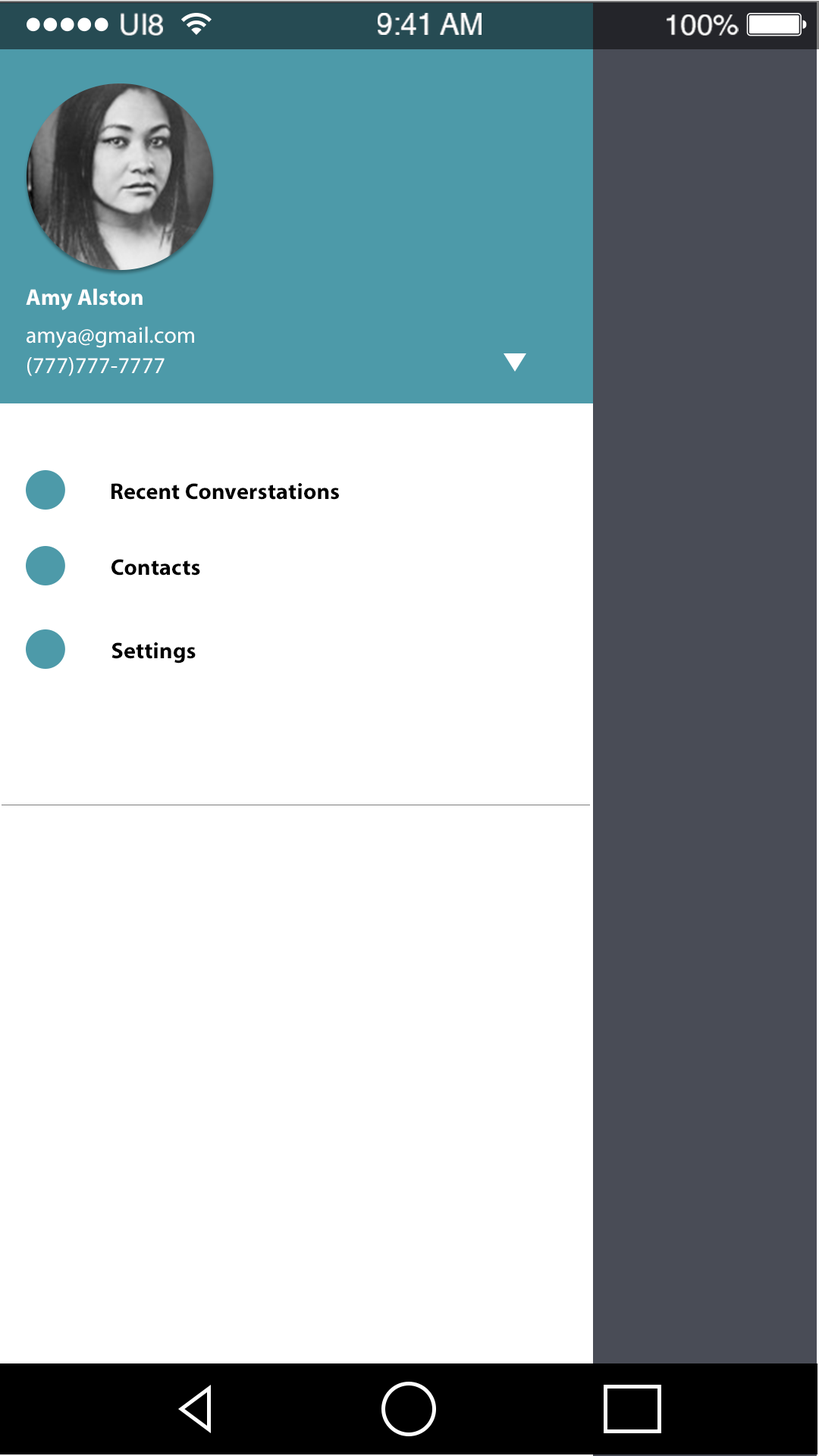
<style>
.page{position:relative;width:819px;height:1456px;background:#ffffff}
.page>*{position:absolute;margin:0}
.t1{font:29.1px "Helvetica";color:#ffffff}
.t2{font:22.7px "MyriadPro-Bold";letter-spacing:0.01em;color:#ffffff}
.t3{font:22.7px "MyriadPro-Regular";letter-spacing:0.01em;color:#ffffff}
.t4{font:22.8px "MyriadPro-Bold";letter-spacing:0.01em;color:#000000}
</style>
<div class="page">
<p class="t1" style="left:121px;top:13px;width:42px;height:23px">UI8</p>
<p class="t1" style="left:378px;top:13px;width:104px;height:22px">9:41 AM</p>
<p class="t1" style="left:667px;top:14px;width:72px;height:22px">100%</p>
<p class="t2" style="left:26px;top:288px;width:117px;height:22px">Amy Alston</p>
<p class="t3" style="left:27px;top:326px;width:167px;height:22px">amya@gmail.com</p>
<p class="t3" style="left:27px;top:357px;width:138px;height:19px">(777)777-7777</p>
<p class="t4" style="left:111px;top:483px;width:228px;height:17px">Recent Converstations</p>
<p class="t4" style="left:111px;top:559px;width:89px;height:17px">Contacts</p>
<p class="t4" style="left:111px;top:642px;width:85px;height:22px">Settings</p>
</div>
